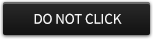
<style>
.page{position:relative;width:153px;height:39px}
.page>*{position:absolute;margin:0}
.t1{font:15px "SourceSansPro-Regular";letter-spacing:-0.01em;color:#f7f7f7;text-transform:uppercase}
</style>
<div class="page">
<p class="t1" style="left:34px;top:13px;width:88px;height:11px">Do not click</p>
</div>
